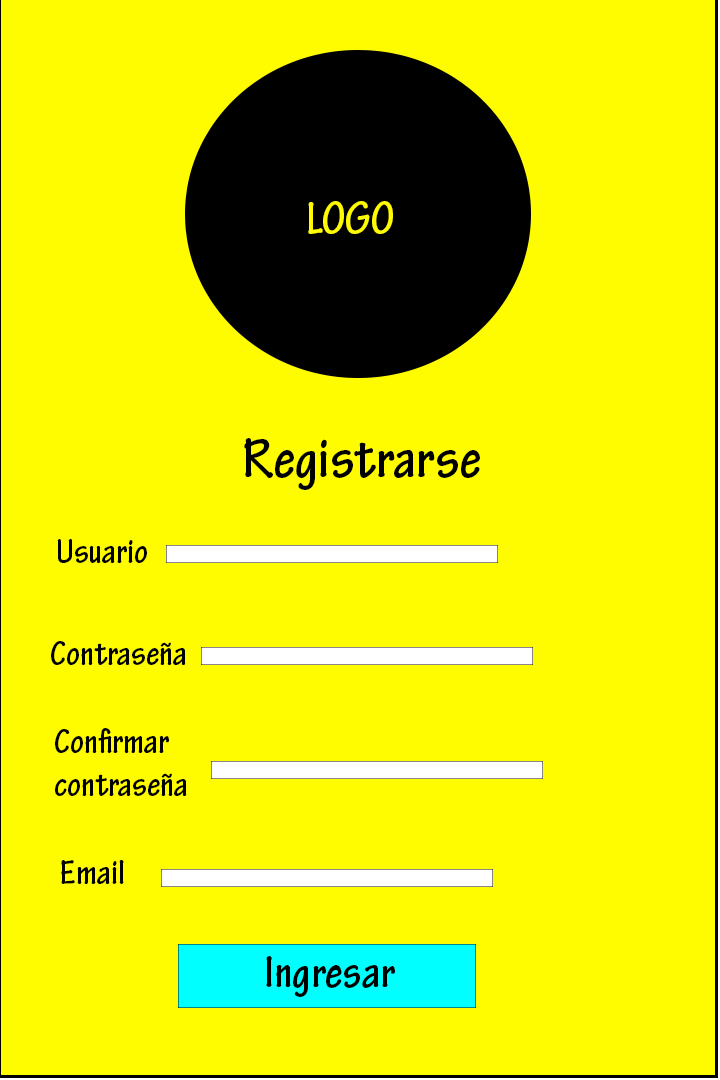
<style>
.page{position:relative;width:720px;height:1080px;background:#fffc00}
.page>*{position:absolute;margin:0}
.t1{font:48px "TektonPro-BoldCond";color:#fffc00}
.t2{font:60px "TektonPro-BoldCond";color:#000000}
.t3{font:36px "TektonPro-BoldCond";color:#000000}
.t4{font:48px "TektonPro-BoldCond";color:#000000}
</style>
<div class="page">
<p class="t1" style="left:308px;top:201px;width:85px;height:33px">LOGO</p>
<p class="t2" style="left:244px;top:438px;width:236px;height:52px">Registrarse</p>
<p class="t3" style="left:57px;top:539px;width:90px;height:24px">Usuario</p>
<p class="t3" style="left:51px;top:641px;width:135px;height:24px">Contraseña</p>
<p class="t3" style="left:55px;top:728px;width:132px;height:68px">Confirmar<br>contraseña</p>
<p class="t3" style="left:61px;top:860px;width:63px;height:24px">Email</p>
<p class="t4" style="left:266px;top:956px;width:129px;height:41px">Ingresar</p>
</div>
